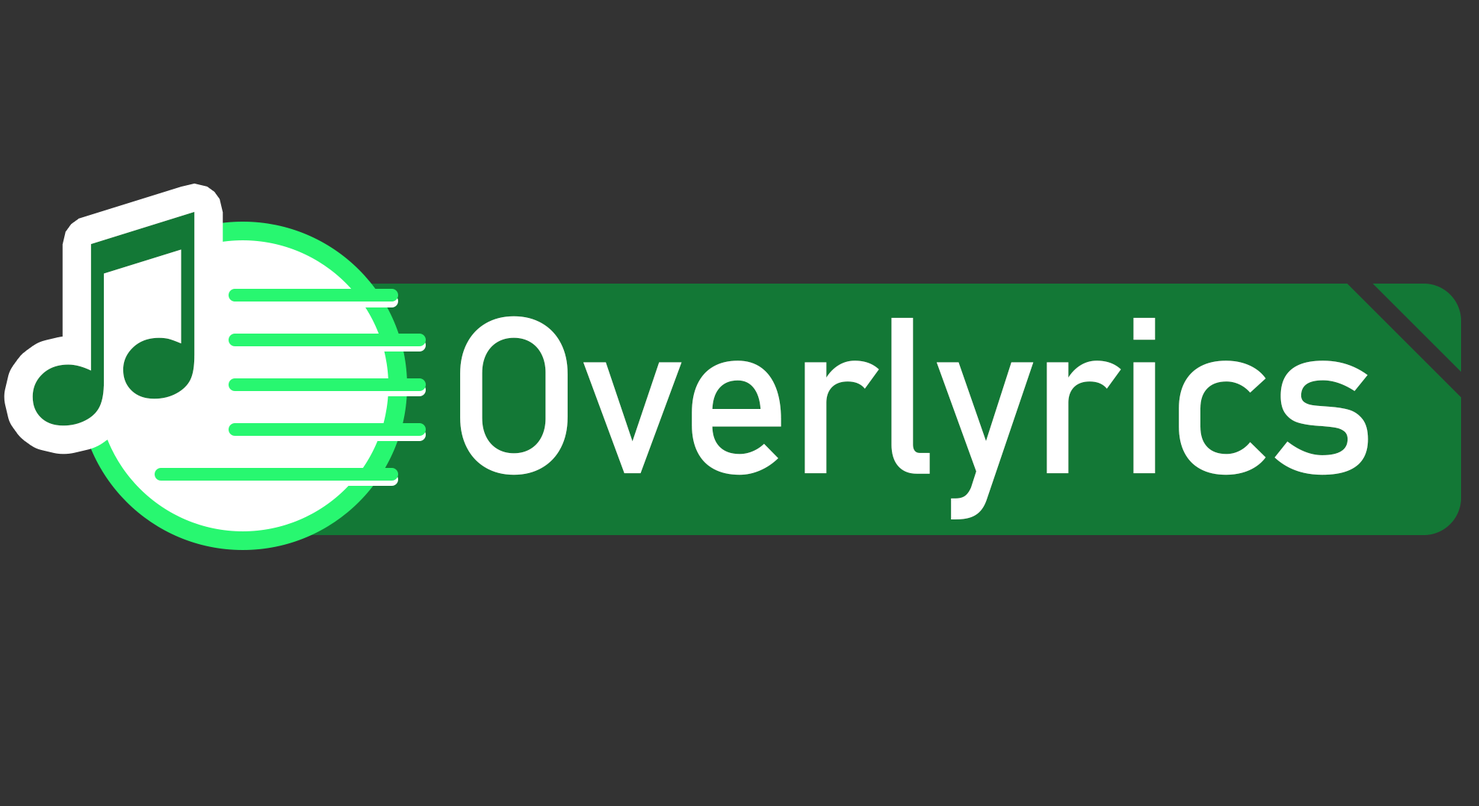
<style>
.page{position:relative;width:1479px;height:806px;background:#333333}
.page>*{position:absolute;margin:0}
.t1{font:265.6px "ArialMT";color:#137836}
.t2{font:218.8px "Bahnschrift";letter-spacing:-0.025em;color:#ffffff}
</style>
<div class="page">
<p class="t1" style="left:32px;top:211px;width:163px;height:215px">♫</p>
<p class="t2" style="left:460px;top:316px;width:908px;height:204px">Overlyrics</p>
</div>
